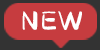
<style>
.page{position:relative;width:100px;height:50px;background:#c63c3f}
.page>*{position:absolute;margin:0}
.t1{font:27.6px "JSArirangHON-Regular";letter-spacing:0.05em;color:#ffffff}
</style>
<div class="page">
<p class="t1" style="left:22px;top:11px;width:60px;height:19px">NEW</p>
</div>
